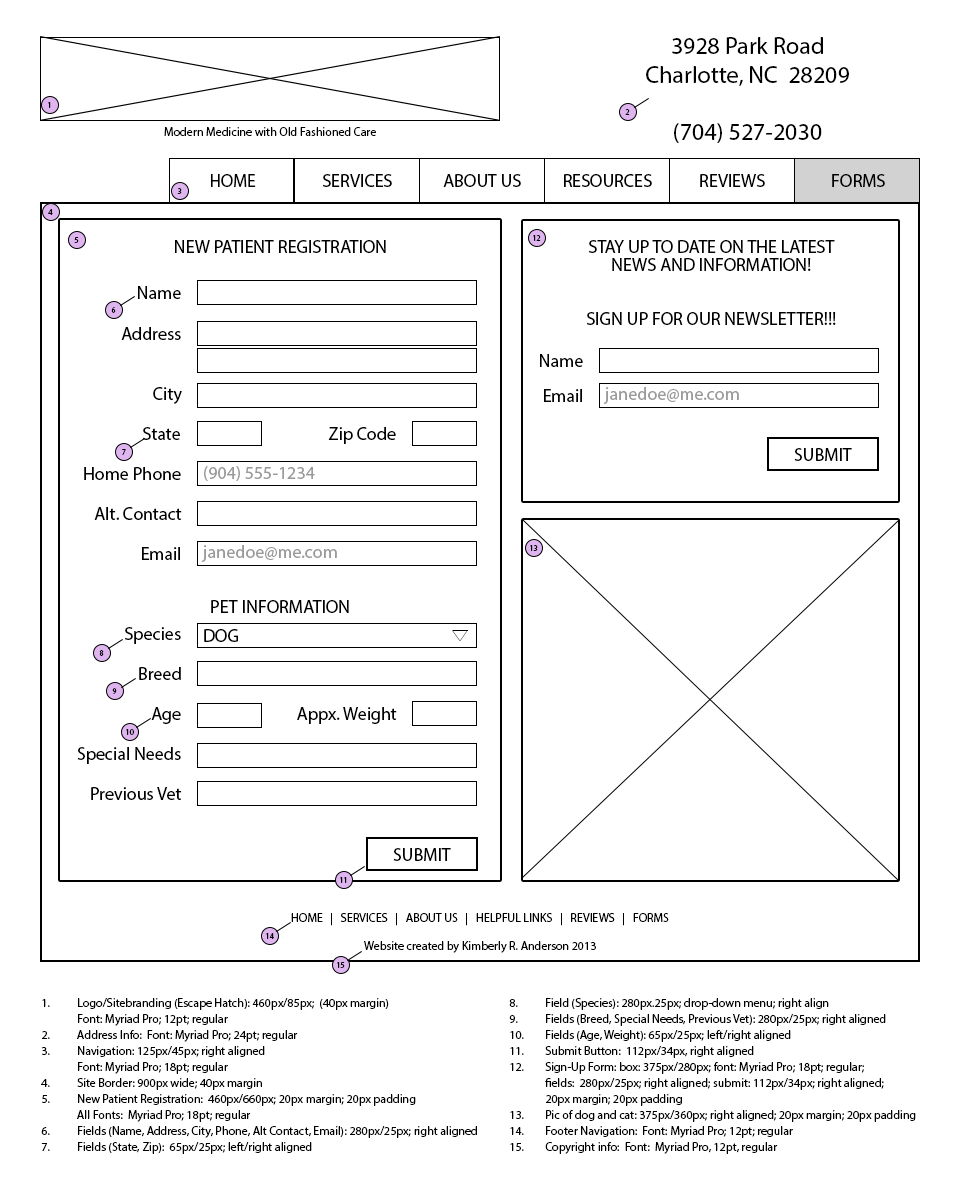
<style>
.page{position:relative;width:960px;height:1200px;background:#ffffff}
.page>*{position:absolute;margin:0}
.t1{font:24px "MyriadPro-Regular";color:#000000}
.t2{font:8px "MyriadPro-Regular";color:#000000}
.t3{font:12px "MyriadPro-Regular";color:#000000}
.t4{font:18px "MyriadPro-Regular";color:#000000}
.t5{font:18px/18px "MyriadPro-Regular";color:#000000}
.t6{font:18px "MyriadPro-Regular";color:#9b9999}
.t7{font:12px/16px "MyriadPro-Regular";color:#000000}
</style>
<div class="page">
<p class="t1" style="left:646px;top:37px;width:203px;height:106px;text-align:center">3928 Park Road<br>Charlotte, NC  28209<br><br>(704) 527-2030</p>
<p class="t2" style="left:48px;top:102px;width:3px;height:6px">1</p>
<p class="t2" style="left:625px;top:109px;width:5px;height:6px">2</p>
<p class="t3" style="left:164px;top:127px;width:212px;height:9px">Modern Medicine with Old Fashioned Care</p>
<p class="t4" style="left:211px;top:174px;width:45px;height:13px">HOME</p>
<p class="t4" style="left:323px;top:174px;width:69px;height:13px">SERVICES</p>
<p class="t4" style="left:443px;top:174px;width:78px;height:13px">ABOUT US</p>
<p class="t4" style="left:564px;top:174px;width:88px;height:13px">RESOURCES</p>
<p class="t4" style="left:700px;top:174px;width:65px;height:13px">REVIEWS</p>
<p class="t4" style="left:832px;top:174px;width:53px;height:13px">FORMS</p>
<p class="t2" style="left:177px;top:188px;width:5px;height:6px">3</p>
<p class="t2" style="left:48px;top:209px;width:5px;height:6px">4</p>
<p class="t2" style="left:74px;top:237px;width:5px;height:6px">5</p>
<p class="t4" style="left:175px;top:240px;width:211px;height:13px">NEW PATIENT REGISTRATION</p>
<p class="t2" style="left:533px;top:235px;width:8px;height:6px">12</p>
<p class="t5" style="left:587px;top:240px;width:249px;height:85px;text-align:center">STAY UP TO DATE ON THE LATEST<br>NEWS AND INFORMATION!<br><br><br>SIGN UP FOR OUR NEWSLETTER!!!</p>
<p class="t4" style="left:138px;top:286px;width:43px;height:13px">Name</p>
<p class="t2" style="left:111px;top:307px;width:5px;height:6px">6</p>
<p class="t4" style="left:121px;top:327px;width:60px;height:13px">Address</p>
<p class="t4" style="left:540px;top:354px;width:43px;height:13px">Name</p>
<p class="t4" style="left:153px;top:387px;width:29px;height:17px">City</p>
<p class="t4" style="left:544px;top:389px;width:38px;height:13px">Email</p>
<p class="t6" style="left:603px;top:387px;width:136px;height:17px">janedoe@me.com</p>
<p class="t4" style="left:143px;top:427px;width:37px;height:13px">State</p>
<p class="t4" style="left:328px;top:427px;width:68px;height:17px">Zip Code</p>
<p class="t2" style="left:122px;top:449px;width:4px;height:6px">7</p>
<p class="t4" style="left:794px;top:448px;width:58px;height:13px">SUBMIT</p>
<p class="t4" style="left:84px;top:467px;width:97px;height:13px">Home Phone</p>
<p class="t6" style="left:204px;top:466px;width:111px;height:15px">(904) 555-1234</p>
<p class="t4" style="left:94px;top:507px;width:88px;height:13px">Alt. Contact</p>
<p class="t6" style="left:201px;top:545px;width:136px;height:17px">janedoe@me.com</p>
<p class="t2" style="left:530px;top:545px;width:8px;height:6px">13</p>
<p class="t4" style="left:142px;top:547px;width:38px;height:13px">Email</p>
<p class="t4" style="left:211px;top:600px;width:138px;height:13px">PET INFORMATION</p>
<p class="t4" style="left:125px;top:627px;width:56px;height:17px">Species</p>
<p class="t4" style="left:204px;top:629px;width:34px;height:13px">DOG</p>
<p class="t2" style="left:99px;top:650px;width:5px;height:6px">8</p>
<p class="t4" style="left:139px;top:667px;width:42px;height:13px">Breed</p>
<p class="t2" style="left:112px;top:688px;width:5px;height:6px">9</p>
<p class="t4" style="left:151px;top:707px;width:30px;height:17px">Age</p>
<p class="t4" style="left:297px;top:707px;width:100px;height:17px">Appx. Weight</p>
<p class="t2" style="left:126px;top:729px;width:8px;height:6px">10</p>
<p class="t4" style="left:77px;top:747px;width:104px;height:17px">Special Needs</p>
<p class="t4" style="left:91px;top:787px;width:91px;height:13px">Previous Vet</p>
<p class="t4" style="left:393px;top:848px;width:58px;height:13px">SUBMIT</p>
<p class="t2" style="left:340px;top:877px;width:7px;height:6px">11</p>
<p class="t3" style="left:291px;top:913px;width:378px;height:13px">HOME   |   SERVICES   |   ABOUT US   |   HELPFUL LINKS   |   REVIEWS   |   FORMS</p>
<p class="t2" style="left:266px;top:933px;width:8px;height:6px">14</p>
<p class="t3" style="left:364px;top:941px;width:232px;height:12px">Website created by Kimberly R. Anderson 2013</p>
<p class="t2" style="left:337px;top:962px;width:8px;height:6px">15</p>
<p class="t7" style="left:41px;top:998px;width:875px;height:156px">1. Logo/Sitebranding (Escape Hatch): 460px/85px;  (40px margin)    8. Field (Species): 280px.25px; drop-down menu; right align<br> Font: Myriad Pro; 12pt; regular        9. Fields (Breed, Special Needs, Previous Vet): 280px/25px; right aligned<br>2. Address Info:  Font: Myriad Pro; 24pt; regular      10. Fields (Age, Weight): 65px/25px; left/right aligned<br>3. Navigation: 125px/45px; right aligned       11. Submit Button:  112px/34px, right aligned<br> Font: Myriad Pro; 18pt; regular        12. Sign-Up Form: box: 375px/280px; font: Myriad Pro; 18pt; regular;  <br>4. Site Border: 900px wide; 40px margin         fields:  280px/25px; right aligned; submit: 112px/34px; right aligned;<br>5. New Patient Registration:  460px/660px; 20px margin; 20px padding    20px margin; 20px padding<br> All Fonts:  Myriad Pro; 18pt; regular        13. Pic of dog and cat: 375px/360px; right aligned; 20px margin; 20px padding <br>6. Fields (Name, Address, City, Phone, Alt Contact, Email): 280px/25px; right aligned 14. Footer Navigation:  Font: Myriad Pro; 12pt; regular<br>7. Fields (State, Zip):  65px/25px; left/right aligned      15. Copyright info:  Font:  Myriad Pro, 12pt, regular</p>
</div>
